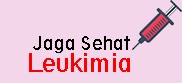
<style>
.page{position:relative;width:182px;height:83px;background:#f4d6eb}
.page>*{position:absolute;margin:0}
.t1{font:18px "Geometric212BT-BookCondensed";color:#000000}
.t2{font:24px "Geometric212BT-BookCondensed";color:#ff0000}
</style>
<div class="page">
<p class="t1" style="left:33px;top:36px;width:97px;height:17px">Jaga Sehat</p>
<p class="t2" style="left:29px;top:53px;width:101px;height:19px">Leukimia</p>
</div>
